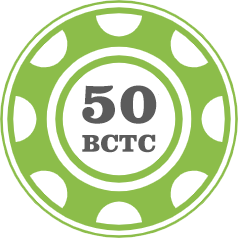
<style>
.page{position:relative;width:238px;height:238px;background:#ffffff}
.page>*{position:absolute;margin:0}
.t1{font:60px "ClarendonBT-Black";color:#5b5b5b}
.t2{font:25px "ClarendonBT-Black";color:#5b5b5b}
</style>
<div class="page">
<p class="t1" style="left:82px;top:85px;width:75px;height:39px">50</p>
<p class="t2" style="left:82px;top:134px;width:74px;height:19px">BCTC</p>
</div>
